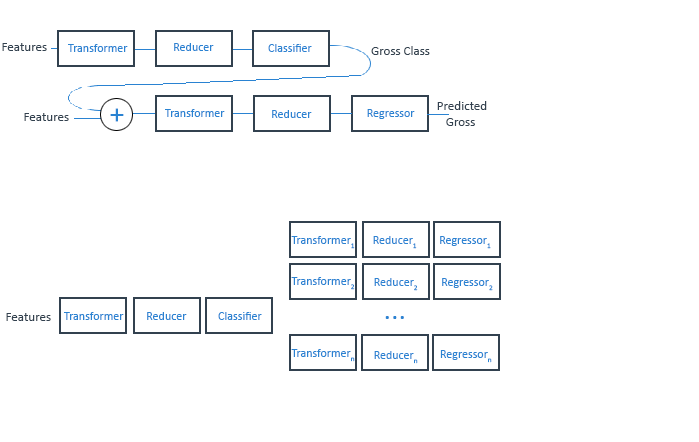
<style>
.page{position:relative;width:699px;height:442px;background:#ffffff}
.page>*{position:absolute;margin:0}
.t1{font:13px "Calibri";color:#32414f}
.t2{font:12px "Calibri";color:#2a83d2}
.t3{font:30px "DroidSerif-Bold";color:#2a83d2}
.t4{font:30px "Calibri";color:#2a83d2}
</style>
<div class="page">
<p class="t1" style="left:2px;top:43px;width:45px;height:8px">Features</p>
<p class="t2" style="left:68px;top:44px;width:60px;height:8px">Transformer</p>
<p class="t2" style="left:174px;top:43px;width:40px;height:8px">Reducer</p>
<p class="t2" style="left:268px;top:44px;width:44px;height:8px">Classifier</p>
<p class="t1" style="left:371px;top:46px;width:59px;height:9px">Gross Class</p>
<p class="t1" style="left:437px;top:101px;width:50px;height:25px;text-align:center">Predicted <br>Gross</p>
<p class="t1" style="left:24px;top:113px;width:45px;height:8px">Features</p>
<p class="t3" style="left:110px;top:108px;width:14px;height:14px">+</p>
<p class="t2" style="left:165px;top:109px;width:60px;height:8px">Transformer</p>
<p class="t2" style="left:272px;top:110px;width:40px;height:8px">Reducer</p>
<p class="t2" style="left:367px;top:109px;width:48px;height:10px">Regressor</p>
<p class="t2" style="left:291px;top:236px;width:64px;height:13px">Transformer1</p>
<p class="t2" style="left:373px;top:236px;width:44px;height:13px">Reducer1</p>
<p class="t2" style="left:440px;top:236px;width:51px;height:13px">Regressor1</p>
<p class="t2" style="left:291px;top:277px;width:64px;height:13px">Transformer2</p>
<p class="t2" style="left:374px;top:278px;width:44px;height:13px">Reducer2</p>
<p class="t2" style="left:442px;top:278px;width:51px;height:13px">Regressor2</p>
<p class="t1" style="left:6px;top:313px;width:45px;height:8px">Features</p>
<p class="t2" style="left:64px;top:312px;width:60px;height:8px">Transformer</p>
<p class="t2" style="left:147px;top:312px;width:40px;height:8px">Reducer</p>
<p class="t2" style="left:218px;top:312px;width:44px;height:8px">Classifier</p>
<p class="t4" style="left:385px;top:316px;width:19px;height:3px">...</p>
<p class="t2" style="left:291px;top:349px;width:64px;height:13px">Transformern</p>
<p class="t2" style="left:374px;top:351px;width:44px;height:13px">Reducern</p>
<p class="t2" style="left:440px;top:350px;width:52px;height:13px">Regressorn</p>
</div>
